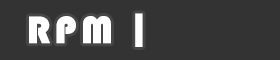
<style>
.page{position:relative;width:280px;height:60px;background:#333333}
.page>*{position:absolute;margin:0}
.t1{font:40px "Bauhaus93";letter-spacing:0.1em;color:#ffffff}
.t2{font:40px "Bauhaus93";color:#ffffff}
</style>
<div class="page">
<p class="t1" style="left:29px;top:16px;width:82px;height:28px">RPM</p>
<p class="t2" style="left:135px;top:13px;width:8px;height:34px">|</p>
</div>
